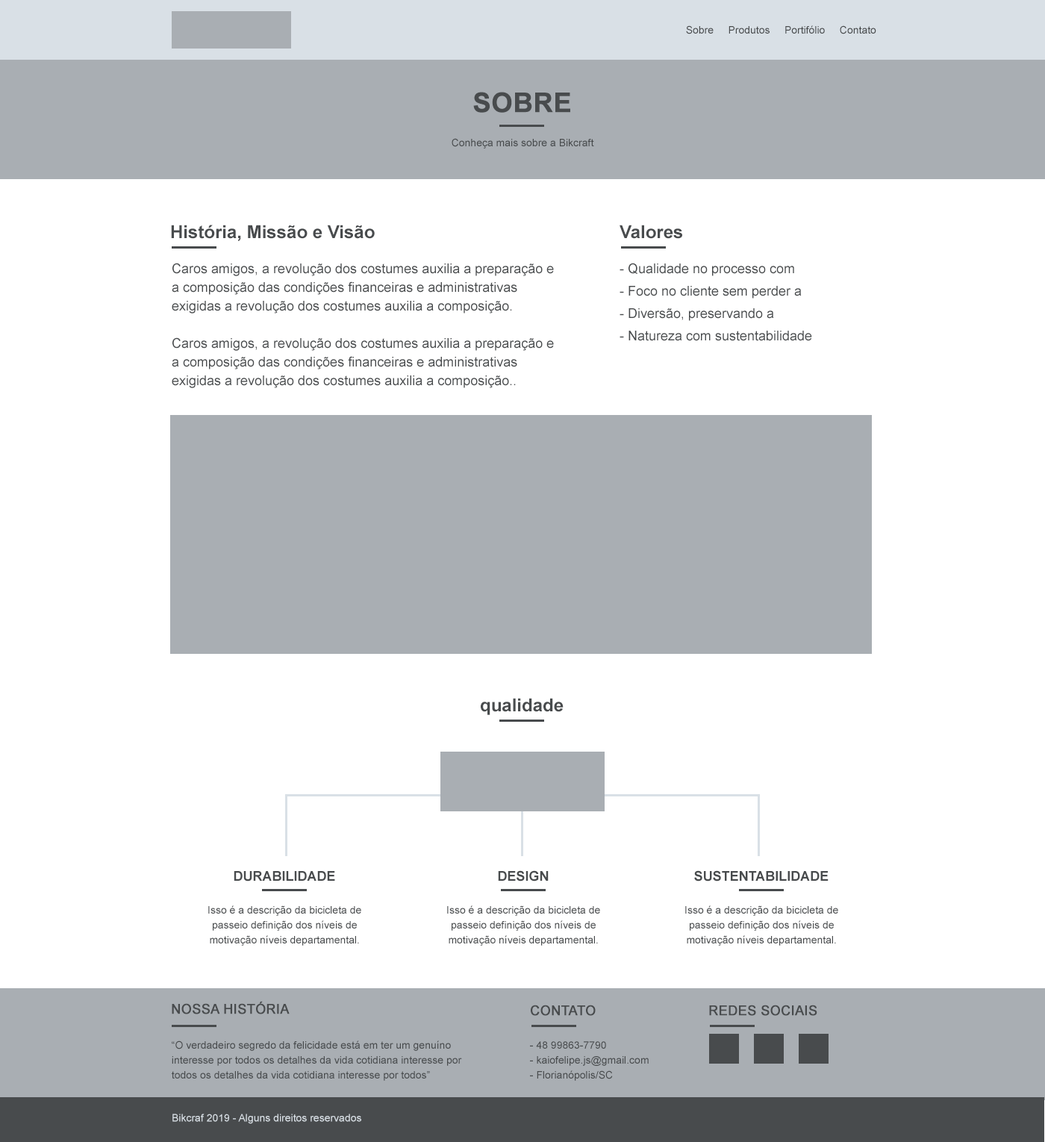
<style>
.page{position:relative;width:1045px;height:1142px;background:#ffffff}
.page>*{position:absolute;margin:0}
.t1{font:10.4px "ArialMT";color:#484b4d}
.t2{font:26.9px "Arial-BoldMT";color:#484b4d;text-transform:uppercase;font-weight:bold}
.t3{font:17.9px "Arial-BoldMT";color:#484b4d}
.t4{font:13.4px/18.7px "ArialMT";color:#484b4d}
.t5{font:13.4px/22.4px "ArialMT";color:#484b4d}
.t6{font:13.4px "Arial-BoldMT";color:#484b4d}
.t7{font:10.4px/14.9px "ArialMT";color:#484b4d}
.t8{font:13.4px "ArialMT";color:#484b4d;text-transform:uppercase;font-weight:bold}
.t9{font:10.4px "ArialMT";color:#d9e0e6}
</style>
<div class="page">
<p class="t1" style="left:686px;top:25px;width:190px;height:9px">Sobre     Produtos     Portifólio     Contato</p>
<p class="t2" style="left:473px;top:92px;width:97px;height:21px">Sobre</p>
<p class="t1" style="left:451px;top:138px;width:143px;height:10px">Conheça mais sobre a Bikcraft</p>
<p class="t3" style="left:171px;top:225px;width:204px;height:16px">História, Missão e Visão</p>
<p class="t3" style="left:619px;top:225px;width:63px;height:14px">Valores</p>
<p class="t4" style="left:172px;top:263px;width:382px;height:125px">Caros amigos, a revolução dos costumes auxilia a preparação e a composição das condições financeiras e administrativas exigidas a revolução dos costumes auxilia a composição.<br><br>Caros amigos, a revolução dos costumes auxilia a preparação e a composição das condições financeiras e administrativas exigidas a revolução dos costumes auxilia a composição..</p>
<p class="t5" style="left:619px;top:263px;width:193px;height:78px">- Qualidade no processo com <br>- Foco no cliente sem perder a <br>- Diversão, preservando a<br>- Natureza com sustentabilidade</p>
<p class="t3" style="left:480px;top:698px;width:83px;height:17px">qualidade</p>
<p class="t6" style="left:498px;top:870px;width:50px;height:11px">DESIGN</p>
<p class="t6" style="left:694px;top:870px;width:134px;height:11px">SUSTENTABILIDADE</p>
<p class="t6" style="left:234px;top:871px;width:101px;height:10px">DURABILIDADE</p>
<p class="t7" style="left:208px;top:905px;width:153px;height:40px;text-align:center">Isso é a descrição da bicicleta de passeio definição dos níveis de motivação níveis departamental.</p>
<p class="t7" style="left:447px;top:905px;width:153px;height:40px;text-align:center">Isso é a descrição da bicicleta de passeio definição dos níveis de motivação níveis departamental.</p>
<p class="t7" style="left:685px;top:905px;width:153px;height:40px;text-align:center">Isso é a descrição da bicicleta de passeio definição dos níveis de motivação níveis departamental.</p>
<p class="t8" style="left:172px;top:1001px;width:117px;height:13px">Nossa História</p>
<p class="t8" style="left:530px;top:1004px;width:65px;height:11px">CONTATO</p>
<p class="t8" style="left:709px;top:1004px;width:108px;height:11px">REDES SOCIAIS</p>
<p class="t7" style="left:172px;top:1040px;width:290px;height:40px">“O verdadeiro segredo da felicidade está em ter um genuíno interesse por todos os detalhes da vida cotidiana interesse por todos os detalhes da vida cotidiana interesse por todos”</p>
<p class="t7" style="left:530px;top:1041px;width:118px;height:39px">- 48 99863-7790<br>- kaiofelipe.js@gmail.com<br>- Florianópolis/SC</p>
<p class="t9" style="left:172px;top:1113px;width:189px;height:11px">Bikcraf 2019 - Alguns direitos reservados</p>
</div>
